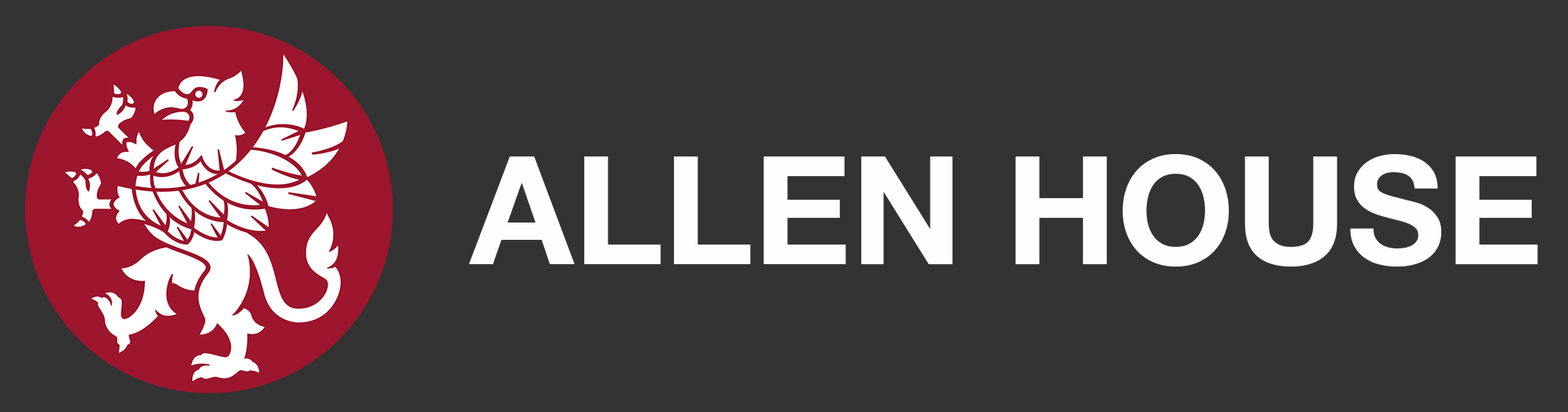
<style>
.page{position:relative;width:1568px;height:412px;background:#333333}
.page>*{position:absolute;margin:0}
.t1{font:151.2px "HelveticaNeue-Bold";color:#fefefe}
</style>
<div class="page">
<p class="t1" style="left:468px;top:154px;width:1070px;height:113px">ALLEN HOUSE</p>
</div>
